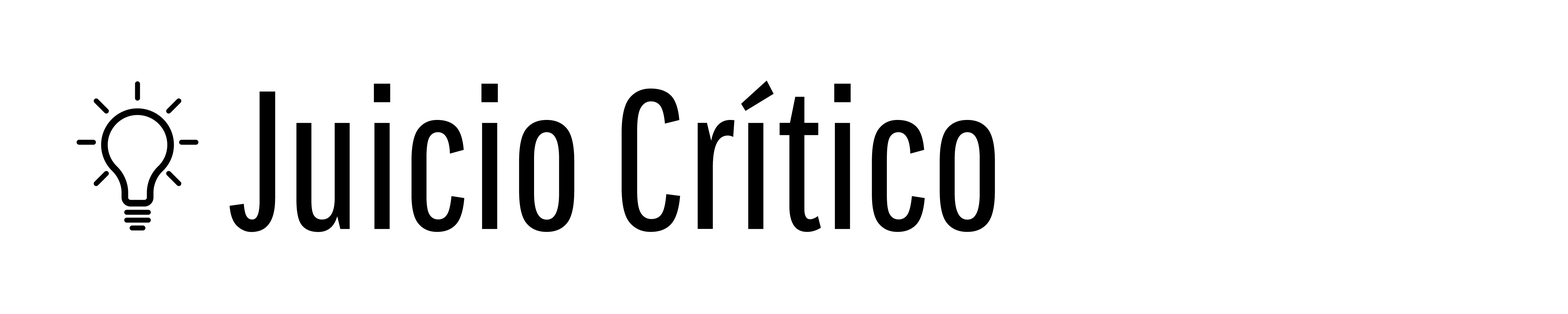
<style>
.page{position:relative;width:1568px;height:314px;background:#ffffff}
.page>*{position:absolute;margin:0}
.t1{font:336.2px "PathwayGothicOne-Book";color:#000000}
</style>
<div class="page">
<p class="t1" style="left:230px;top:80px;width:765px;height:152px">Juicio Crítico</p>
</div>
